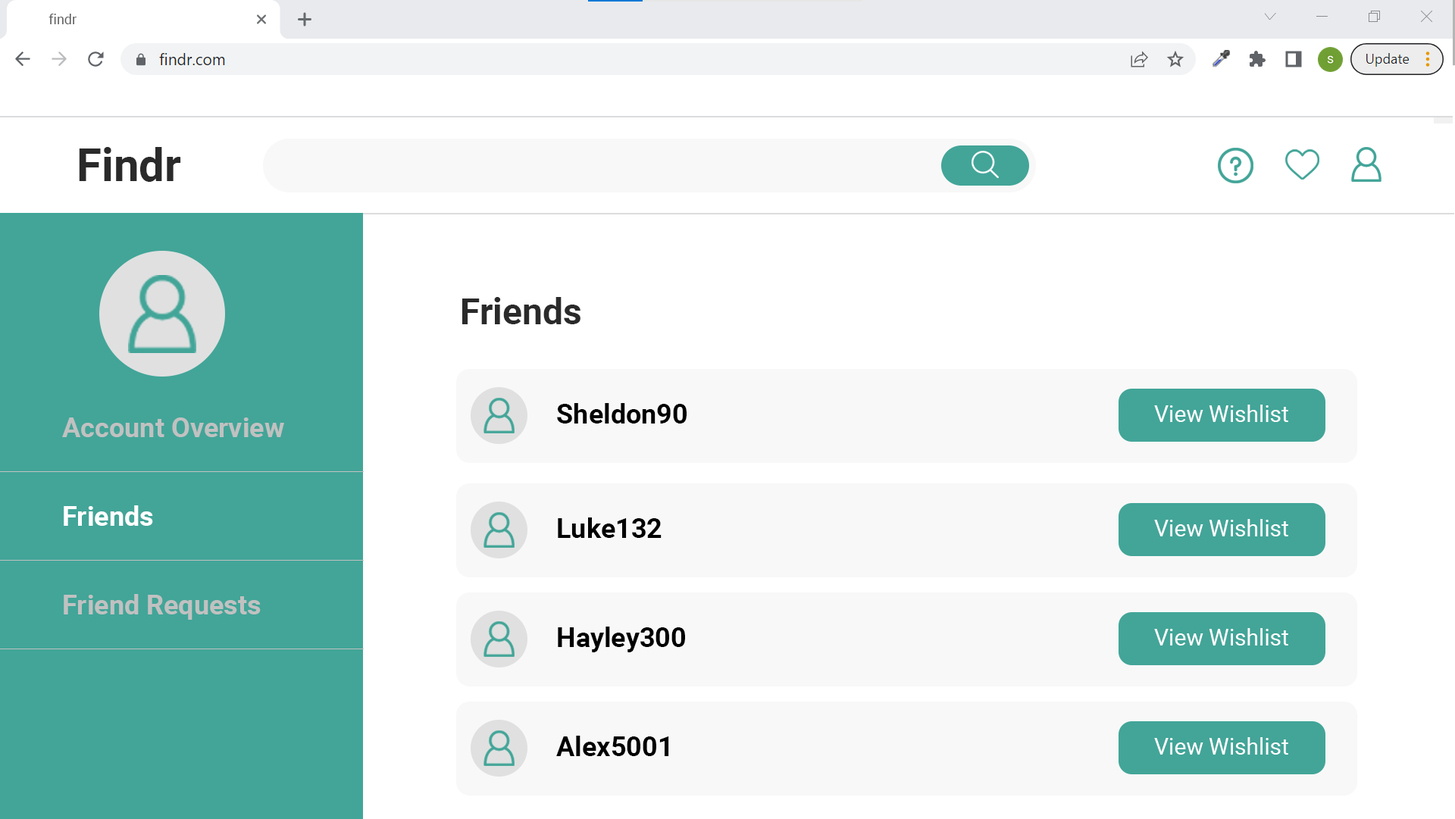
<style>
.page{position:relative;width:1455px;height:819px;background:#ffffff}
.page>*{position:absolute;margin:0}
.t1{font:13.6px "Roboto-Regular";color:#5f5f5f}
.t2{font:45.5px "Roboto-Bold";color:#2a2a2a}
.t3{font:36.4px "Roboto-Bold";color:#2a2a2a}
.t4{font:27.3px "Roboto-Bold";color:#000000}
.t5{font:22.7px "Roboto-Regular";color:#ffffff}
.t6{font:27.3px "Roboto-Bold";color:#c1c1c1}
.t7{font:27.3px "Roboto-Bold";color:#ffffff}
</style>
<div class="page">
<p class="t1" style="left:49px;top:14px;width:28px;height:10px">findr</p>
<p class="t2" style="left:79px;top:147px;width:102px;height:35px">Findr</p>
<p class="t3" style="left:462px;top:297px;width:119px;height:27px">Friends</p>
<p class="t4" style="left:557px;top:403px;width:130px;height:21px">Sheldon90</p>
<p class="t5" style="left:1154px;top:405px;width:135px;height:17px">View Wishlist</p>
<p class="t6" style="left:62px;top:418px;width:222px;height:19px">Account Overview</p>
<p class="t7" style="left:64px;top:506px;width:89px;height:20px">Friends</p>
<p class="t4" style="left:558px;top:518px;width:104px;height:20px">Luke132</p>
<p class="t5" style="left:1154px;top:519px;width:135px;height:18px">View Wishlist</p>
<p class="t6" style="left:64px;top:594px;width:197px;height:26px">Friend Requests</p>
<p class="t4" style="left:558px;top:627px;width:127px;height:26px">Hayley300</p>
<p class="t5" style="left:1154px;top:628px;width:135px;height:18px">View Wishlist</p>
<p class="t4" style="left:556px;top:736px;width:113px;height:20px">Alex5001</p>
<p class="t5" style="left:1154px;top:738px;width:135px;height:17px">View Wishlist</p>
</div>
